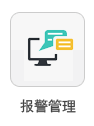
<style>
.page{position:relative;width:94px;height:126px;background:#ffffff}
.page>*{position:absolute;margin:0}
.t1{font:14px "SimHei";color:#434343}
</style>
<div class="page">
<p class="t1" style="left:20px;top:99px;width:56px;height:14px">报警管理</p>
</div>
